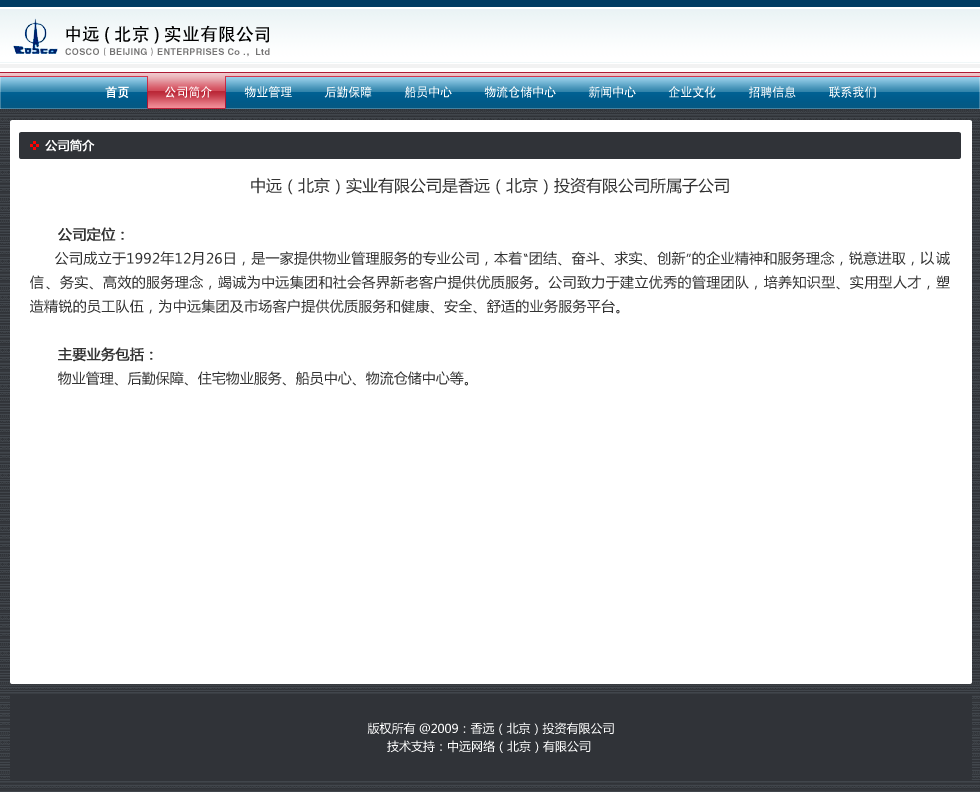
<style>
.page{position:relative;width:980px;height:792px;background:#ffffff}
.page>*{position:absolute;margin:0}
.t1{font:18px "AdobeHeitiStd-Regular";color:#000000}
.t2{font:9px "HelveticaLTStd-Bold";letter-spacing:0.04em;color:#747373}
.t3{font:9px "FZDHTJW--GB1-0";letter-spacing:0.04em;color:#747373}
.t4{font:12px "SIL-Hei-Med-Jian";color:#ffffff}
.t5{font:12px "SIL-Hei-Med-Jian";color:#ffffff;font-weight:bold}
.t6{font:12px "MicrosoftYaHei";color:#ffffff;font-weight:bold}
.t7{font:14px/24px "MicrosoftYaHei";letter-spacing:0.02em;color:#333333}
.t8{font:16px/24px "MicrosoftYaHei";color:#333333}
.t9{font:14px/24px "MicrosoftYaHei";color:#333333;font-weight:bold}
.t10{font:14px/24px "MicrosoftYaHei";letter-spacing:0.12em;color:#333333}
.t11{font:14px/24px "MicrosoftYaHei";color:#333333}
.t12{font:12px/18px "MicrosoftYaHei";color:#ffffff}
</style>
<div class="page">
<p class="t1" style="left:66px;top:25px;width:203px;height:19px">中远 ( 北京 ) 实业有限公司</p>
<p class="t2" style="left:65px;top:47px;width:205px;height:10px">COSCO<span class="t3">（</span>BEIJING<span class="t3">）</span>ENTERPRISES Co .<span class="t3">，</span>Ltd</p>
<p class="t4" style="left:105px;top:86px;width:771px;height:12px"><span class="t5">首页        </span>公司简介        物业管理        后勤保障        船员中心        物流仓储中心        新闻中心        企业文化        招聘信息        联系我们</p>
<p class="t6" style="left:45px;top:139px;width:50px;height:13px">公司简介</p>
<p class="t7" style="left:30px;top:177px;width:920px;height:209px;text-align:center"><span class="t8">中远（北京）实业有限公司是香远（北京）投资有限公司所属子公司<br><br>      </span><span class="t9">公司定位：<br></span>      公司成立于1992年12月26日，是一家提供物业管理服务的专业公司，本着“团结、奋斗、求实、创新”的企业精神和服务理念，锐意进取，<span class="t10">以诚信</span>、务实、高效的服务理念，竭诚为中远集团和社会各界新老客户提供优质服务。公司致力于建立优秀的管理团队，培养知识型、实用型人才，塑造精锐的员工队伍，为中远集团及市场客户提供优质服务和健康、安全、舒适的业务服务平台。<br><br>      <span class="t9">主要业务包括：<br></span><span class="t11">      物业管理、后勤保障、住宅物业服务、船员中心、物流仓储中心等。</span></p>
<p class="t12" style="left:367px;top:722px;width:247px;height:31px;text-align:center">版权所有 @2009：香远（北京）投资有限公司<br>技术支持：中远网络（北京）有限公司</p>
</div>
